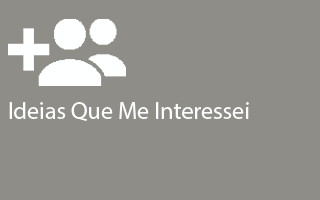
<style>
.page{position:relative;width:320px;height:200px;background:#8e8d88}
.page>*{position:absolute;margin:0}
.t1{font:24px "MyriadPro-Regular";color:#feffff}
</style>
<div class="page">
<p class="t1" style="left:9px;top:102px;width:240px;height:19px">Ideias Que Me Interessei</p>
</div>
